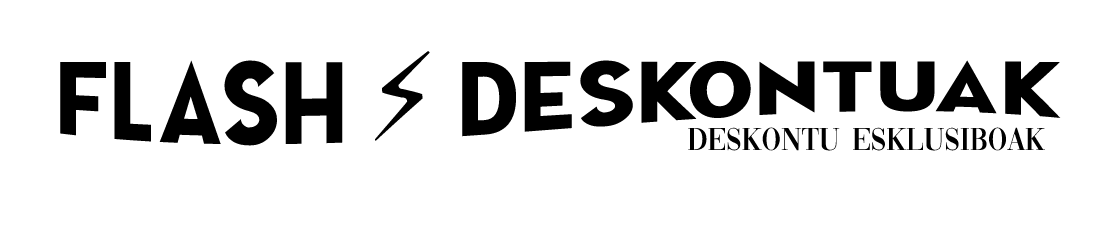
<style>
.page{position:relative;width:1100px;height:230px;background:#ffffff}
.page>*{position:absolute;margin:0}
.t1{font:89px "NEWSFLASH";color:#000000}
.t2{font:102px "DejaVuSans-Bold";color:#000000}
.t3{font:33px "Vogue-Regular";color:#000000}
</style>
<div class="page">
<p class="t1" style="left:60px;top:51px;width:1001px;height:95px">FLASH <span class="t2">⚡ </span>DESKONTUAK</p>
<p class="t3" style="left:688px;top:127px;width:358px;height:24px">DESKONTU ESKLUSIBOAK</p>
</div>
